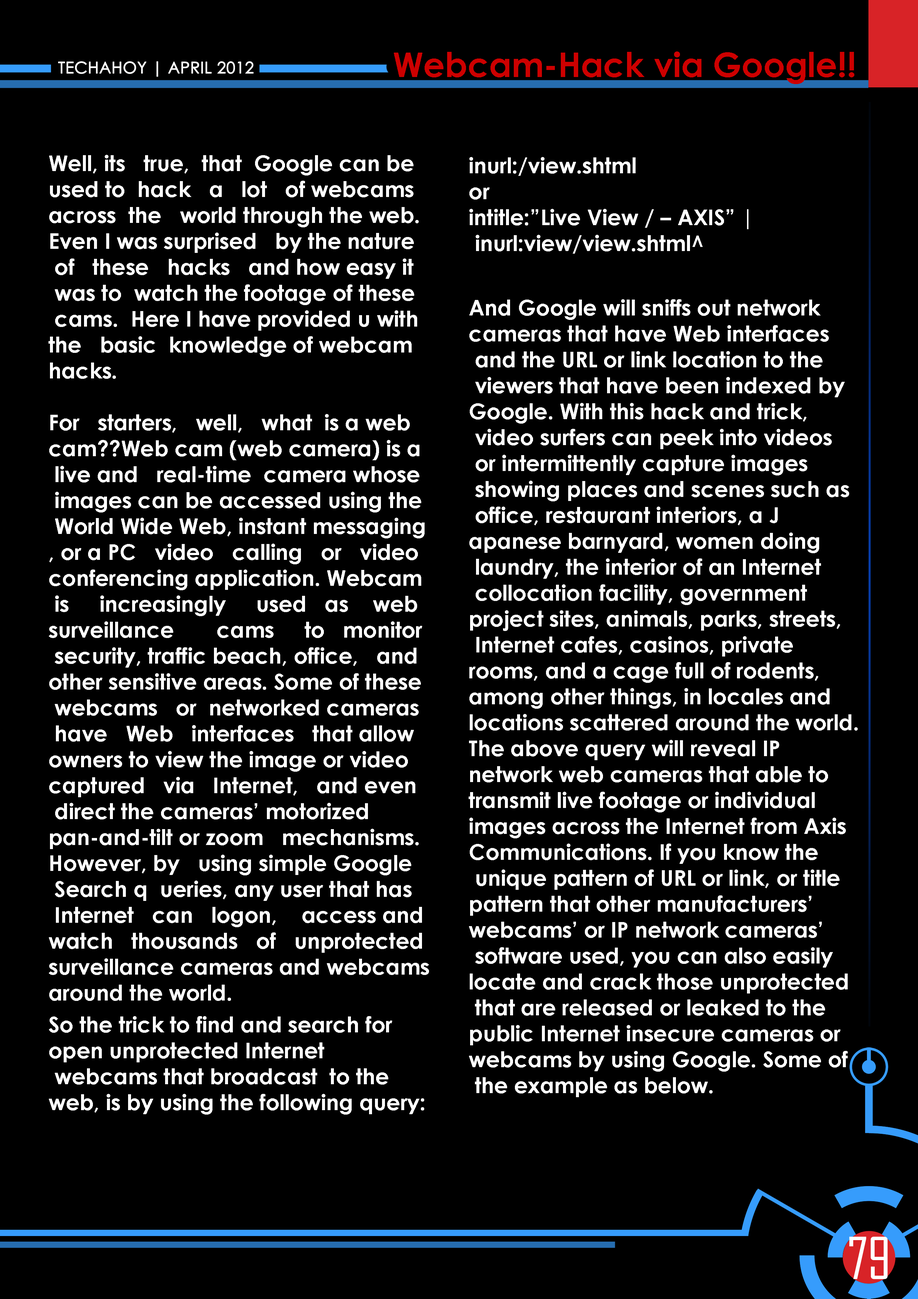
<style>
.page{position:relative;width:918px;height:1299px;background:#000000}
.page>*{position:absolute;margin:0}
.t1{font:33.9px "CenturyGothic-Bold";color:#cd0000}
.t2{font:16px "CenturyGothic";color:#ffffff;text-transform:uppercase;font-weight:bold}
.t3{font:21.6px "CenturyGothic-Bold";color:#ffffff}
.t4{font:55.3px "AgencyFB-Reg";color:#ffffff;text-transform:uppercase}
</style>
<div class="page">
<p class="t1" style="left:394px;top:51px;width:460px;height:33px">Webcam-Hack via Google!!</p>
<p class="t2" style="left:58px;top:61px;width:196px;height:16px">techahoy | APRIL 2012</p>
<p class="t3" style="left:48px;top:155px;width:381px;height:846px;text-align:justify">Well, its   true,  that  Google can be <br>used to  hack   a   lot   of webcams <br>across  the   world through the web. <br>Even I was surprised   by the nature<br> of   these   hacks   and how easy it<br> was to  watch the footage of these<br> cams.  Here I have provided u with <br>the   basic  knowledge of webcam <br>hacks.<br><br>For   starters,   well,   what  is a web <br>cam??Web cam (web camera) is a<br> live and   real-time  camera whose<br> images can be accessed using the<br> World Wide Web, instant messaging<br>, or a PC   video   calling   or   video <br>conferencing application. Webcam<br> is     increasingly     used   as    web <br>surveillance       cams     to   monitor<br> security, traffic beach, office,   and <br>other sensitive areas. Some of these<br> webcams   or  networked cameras<br> have   Web   interfaces   that allow <br>owners to view the image or video <br>captured   via   Internet,   and even<br> direct the cameras’ motorized <br>pan-and-tilt or zoom   mechanisms. <br>However, by   using simple Google<br> Search q  ueries, any user that has<br> Internet   can   logon,    access and <br>watch   thousands   of   unprotected <br>surveillance cameras and webcams<br>around the world.</p>
<p class="t3" style="left:469px;top:157px;width:280px;height:97px;text-align:justify">inurl:/view.shtml<br>or<br>intitle:”Live View / – AXIS” |<br> inurl:view/view.shtml^</p>
<p class="t3" style="left:49px;top:1016px;width:375px;height:98px;text-align:justify">So the trick to find and search for <br>open unprotected Internet <br> webcams that broadcast  to the <br>web, is by using the following query:</p>
<p class="t4" style="left:849px;top:1236px;width:39px;height:43px">79</p>
</div>
